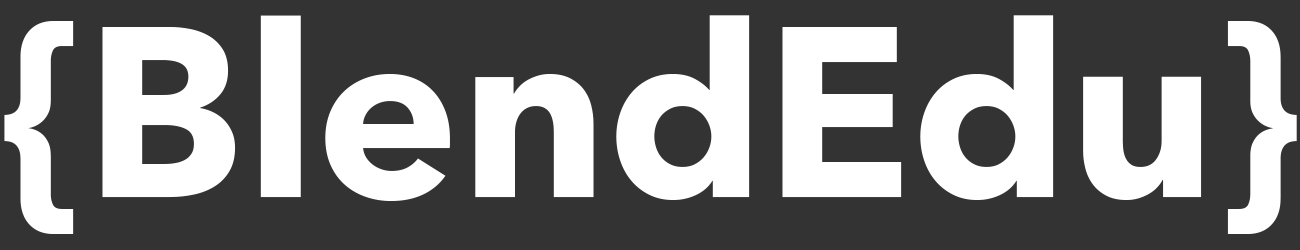
<style>
.page{position:relative;width:1300px;height:250px;background:#333333}
.page>*{position:absolute;margin:0}
.t1{font:240px "AvenirNext-Bold";color:#ffffff}
</style>
<div class="page">
<p class="t1" style="left:4px;top:15px;width:1293px;height:219px">{BlendEdu}</p>
</div>
